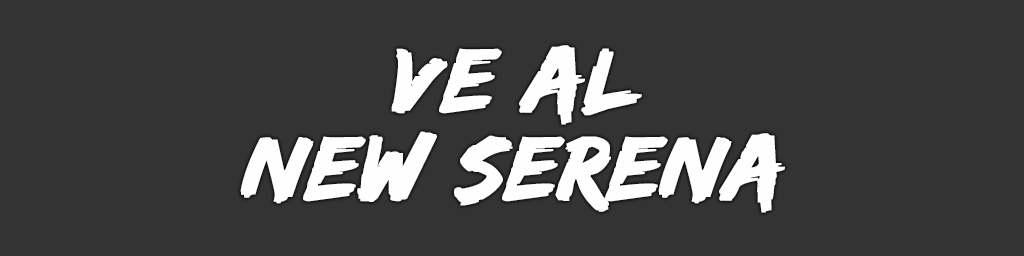
<style>
.page{position:relative;width:1024px;height:256px;background:#333333}
.page>*{position:absolute;margin:0}
.t1{font:94px/88px "EdoSZ";color:#fefefe;font-weight:bold;font-style:italic;scale:1.04 1}
</style>
<div class="page">
<p class="t1" style="left:240px;top:45px;width:545px;height:168px;text-align:center">ve al<br> new serena</p>
</div>
